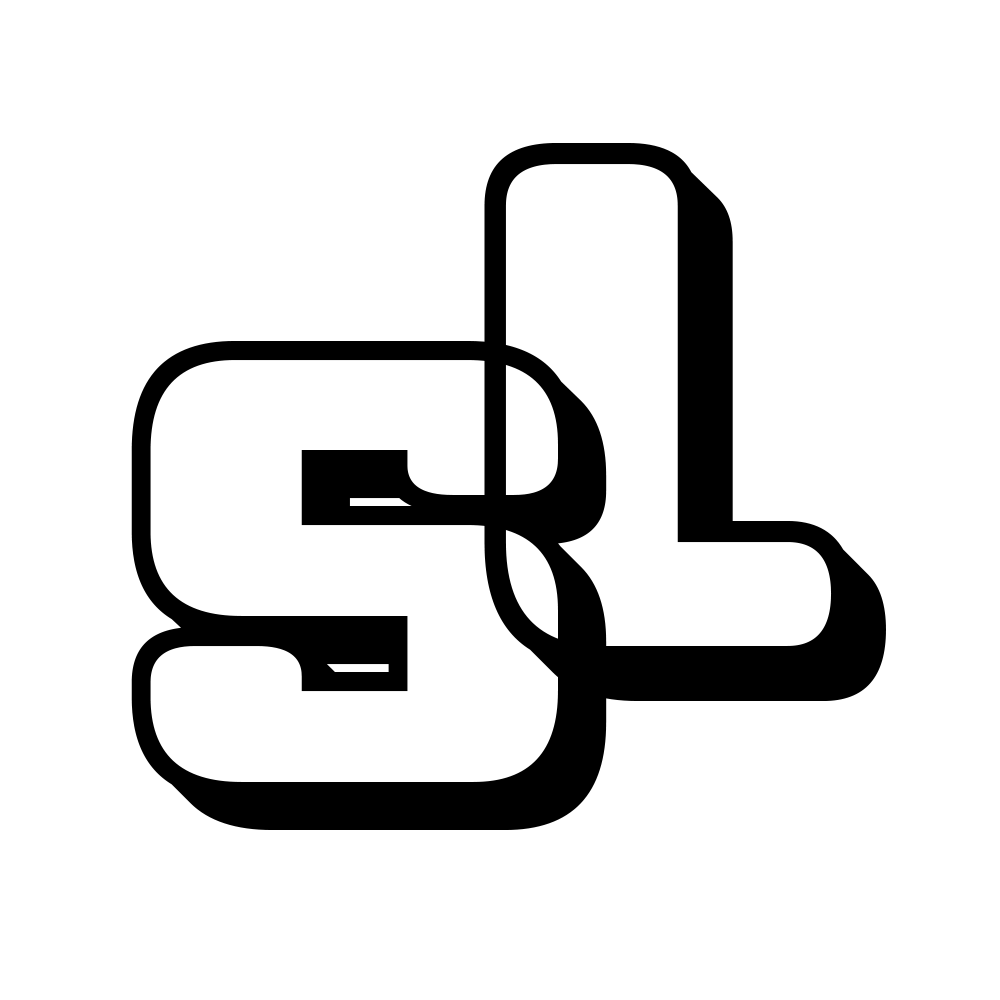
<style>
.page{position:relative;width:1000px;height:1000px;background:#ffffff}
.page>*{position:absolute;margin:0}
.t1{font:713.2px "Professor3D-Regular";color:#000000}
.t2{font:625.1px "Professor3D-Regular";color:#000000}
</style>
<div class="page">
<p class="t1" style="left:484px;top:143px;width:402px;height:558px">L</p>
<p class="t2" style="left:131px;top:341px;width:476px;height:489px">S</p>
</div>
